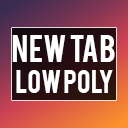
<style>
.page{position:relative;width:128px;height:128px}
.page>*{position:absolute;margin:0}
.t1{font:30px "Bebas";color:#ffffff}
.t2{font:26px "Bebas";color:#ffffff}
</style>
<div class="page">
<p class="t1" style="left:12px;top:35px;width:103px;height:27px">new tab</p>
<p class="t2" style="left:16px;top:70px;width:97px;height:23px">low poly</p>
</div>
